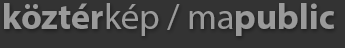
<style>
.page{position:relative;width:345px;height:48px;background:#333333}
.page>*{position:absolute;margin:0}
.t1{font:36px "MyriadPro-Regular";color:#9a9a9a}
.t2{font:36px "MyriadPro-Bold";color:#9a9a9a}
</style>
<div class="page">
<p class="t1" style="left:4px;top:3px;width:330px;height:33px"><span class="t2">köztér</span>kép / ma<span class="t2">public</span></p>
</div>
